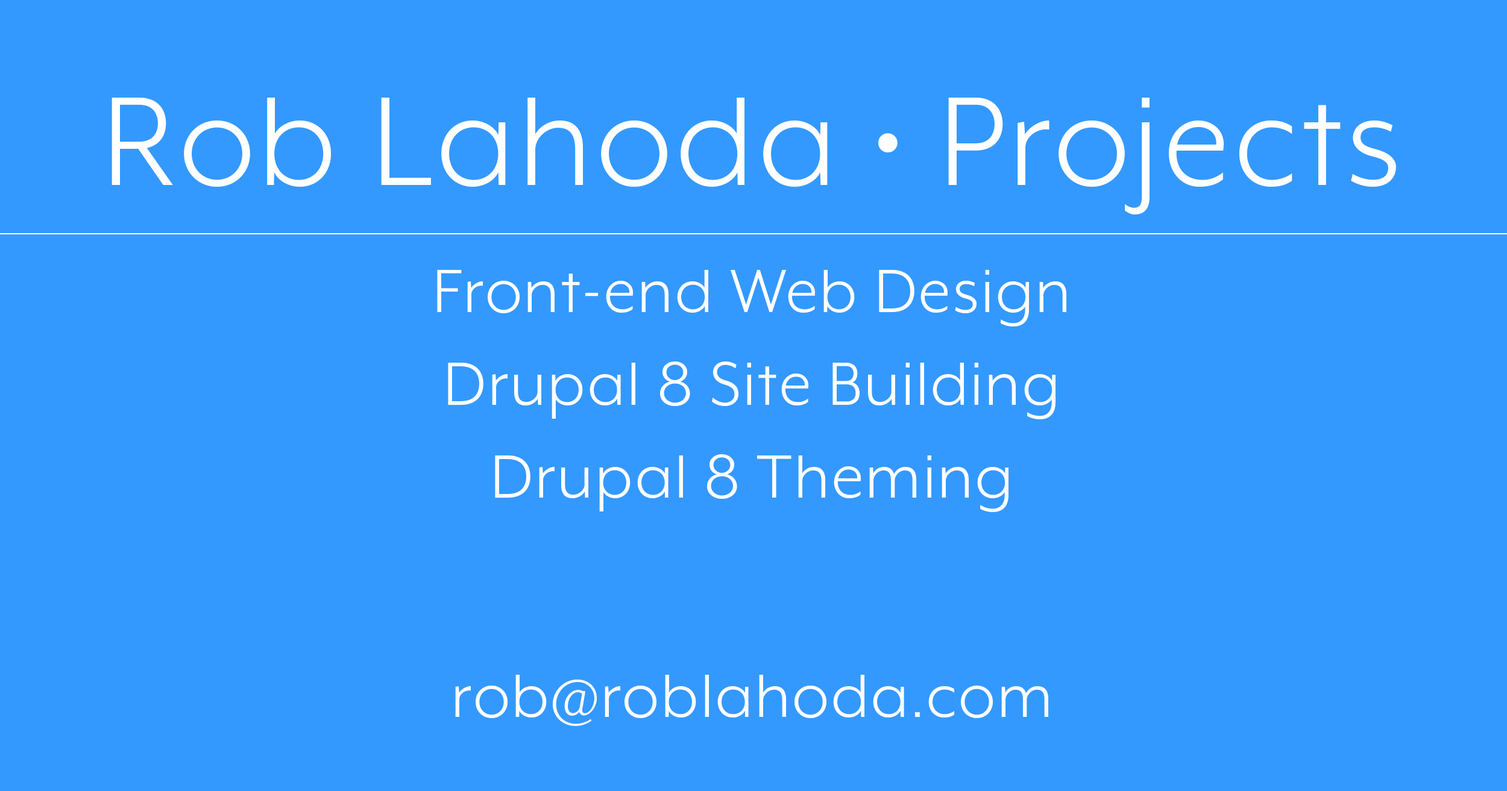
<style>
.page{position:relative;width:1507px;height:791px;background:#3399ff}
.page>*{position:absolute;margin:0}
.t1{font:145.7px "MrEavesXLModOT-Book";letter-spacing:0.025em;color:#ffffff}
.t2{font:70.3px/92.9px "MrEavesXLModOT-Book";letter-spacing:0.025em;color:#ffffff}
.t3{font:70.3px "MrEavesXLModOT-Book";letter-spacing:0.025em;color:#ffffff}
</style>
<div class="page">
<p class="t1" style="left:112px;top:98px;width:1284px;height:117px">Rob Lahoda • Projects</p>
<p class="t2" style="left:437px;top:270px;width:629px;height:242px;text-align:center">Front-end Web Design<br>Drupal 8 Site Building<br>Drupal 8 Theming</p>
<p class="t3" style="left:455px;top:675px;width:593px;height:51px">rob@roblahoda.com</p>
</div>
